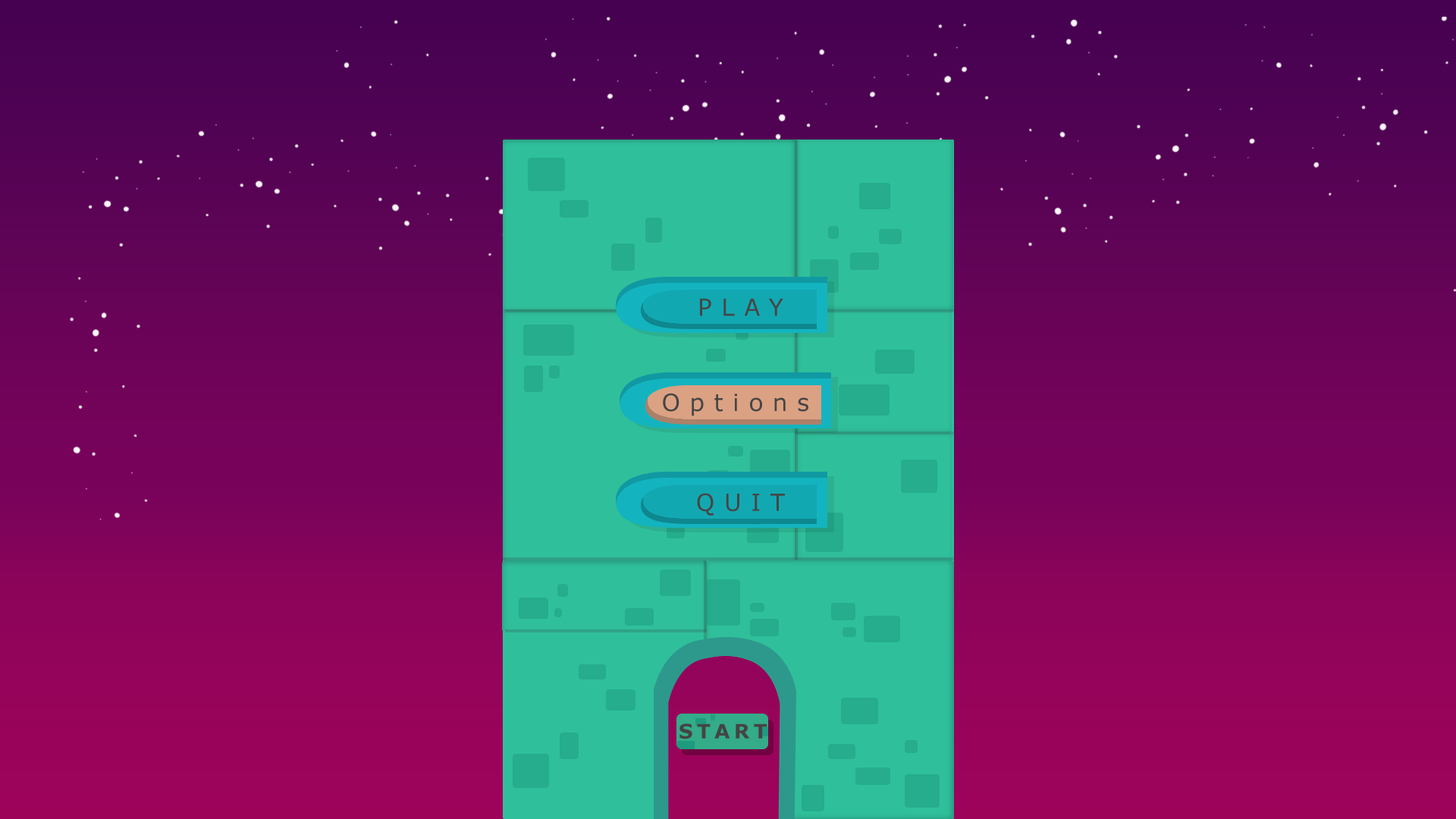
<style>
.page{position:relative;width:1456px;height:819px}
.page>*{position:absolute;margin:0}
.t1{font:23.7px "Verdana";letter-spacing:0.4em;color:#444645}
.t2{font:19.8px "Verdana-Bold";letter-spacing:0.2em;color:#444444}
</style>
<div class="page">
<p class="t1" style="left:700px;top:298px;width:83px;height:18px">PLAY</p>
<p class="t1" style="left:663px;top:393px;width:145px;height:23px">Options</p>
<p class="t1" style="left:697px;top:493px;width:88px;height:23px">QUIT</p>
<p class="t2" style="left:679px;top:723px;width:88px;height:16px">START</p>
</div>
